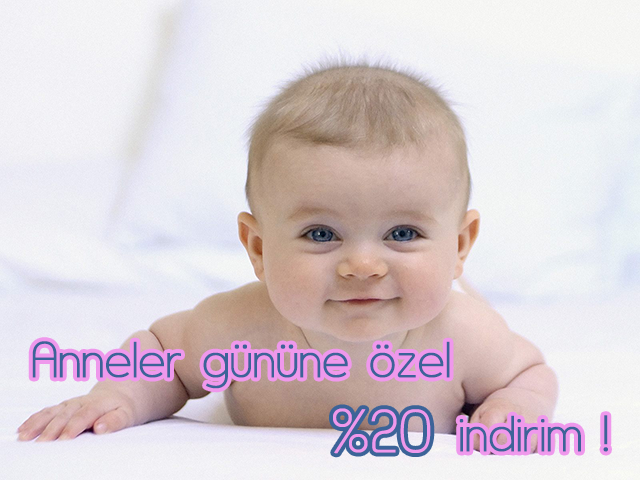
<style>
.page{position:relative;width:640px;height:480px}
.page>*{position:absolute;margin:0}
.t1{font:60px "Asenine";color:#3c6398;font-weight:bold}
.t2{font:72px "Asenine";color:#ef98ec;font-weight:bold}
</style>
<div class="page">
<p class="t1" style="left:32px;top:341px;width:418px;height:48px">Anneler gününe özel</p>
<p class="t2" style="left:333px;top:408px;width:98px;height:46px">%20</p>
<p class="t1" style="left:459px;top:415px;width:149px;height:37px">indirim !</p>
</div>
